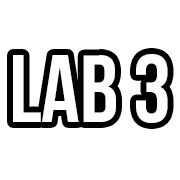
<style>
.page{position:relative;width:180px;height:180px;background:#ffffff}
.page>*{position:absolute;margin:0}
.t1{font:95px "BebasNeueBold";color:#ffffff}
</style>
<div class="page">
<p class="t1" style="left:13px;top:54px;width:155px;height:69px">lab 3</p>
</div>
